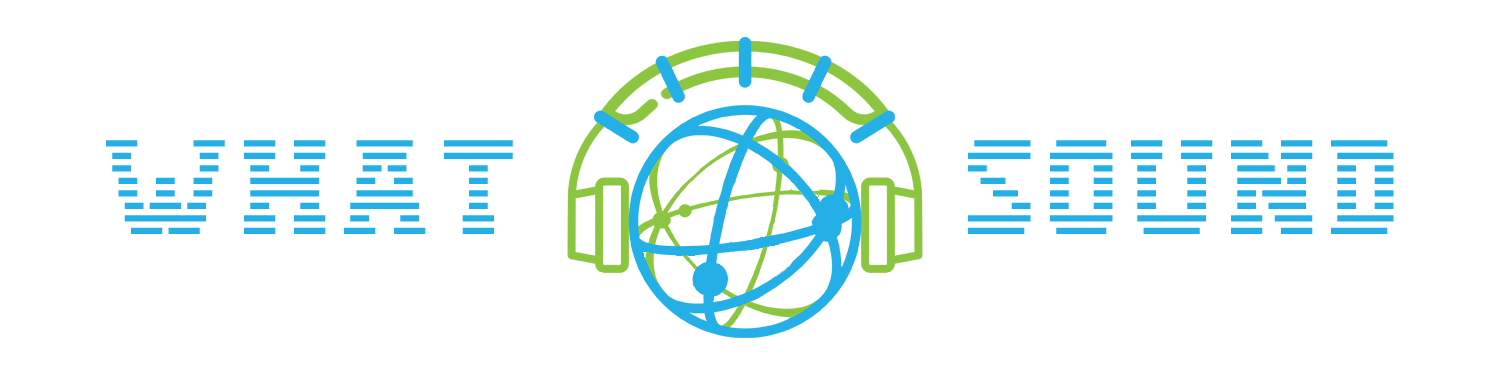
<style>
.page{position:relative;width:1500px;height:374px;background:#ffffff}
.page>*{position:absolute;margin:0}
.t1{font:100px "IBM-Logo";color:#24b0e6}
</style>
<div class="page">
<p class="t1" style="left:106px;top:140px;width:407px;height:94px">WHAT</p>
<p class="t1" style="left:968px;top:140px;width:426px;height:94px">SOUND</p>
</div>
